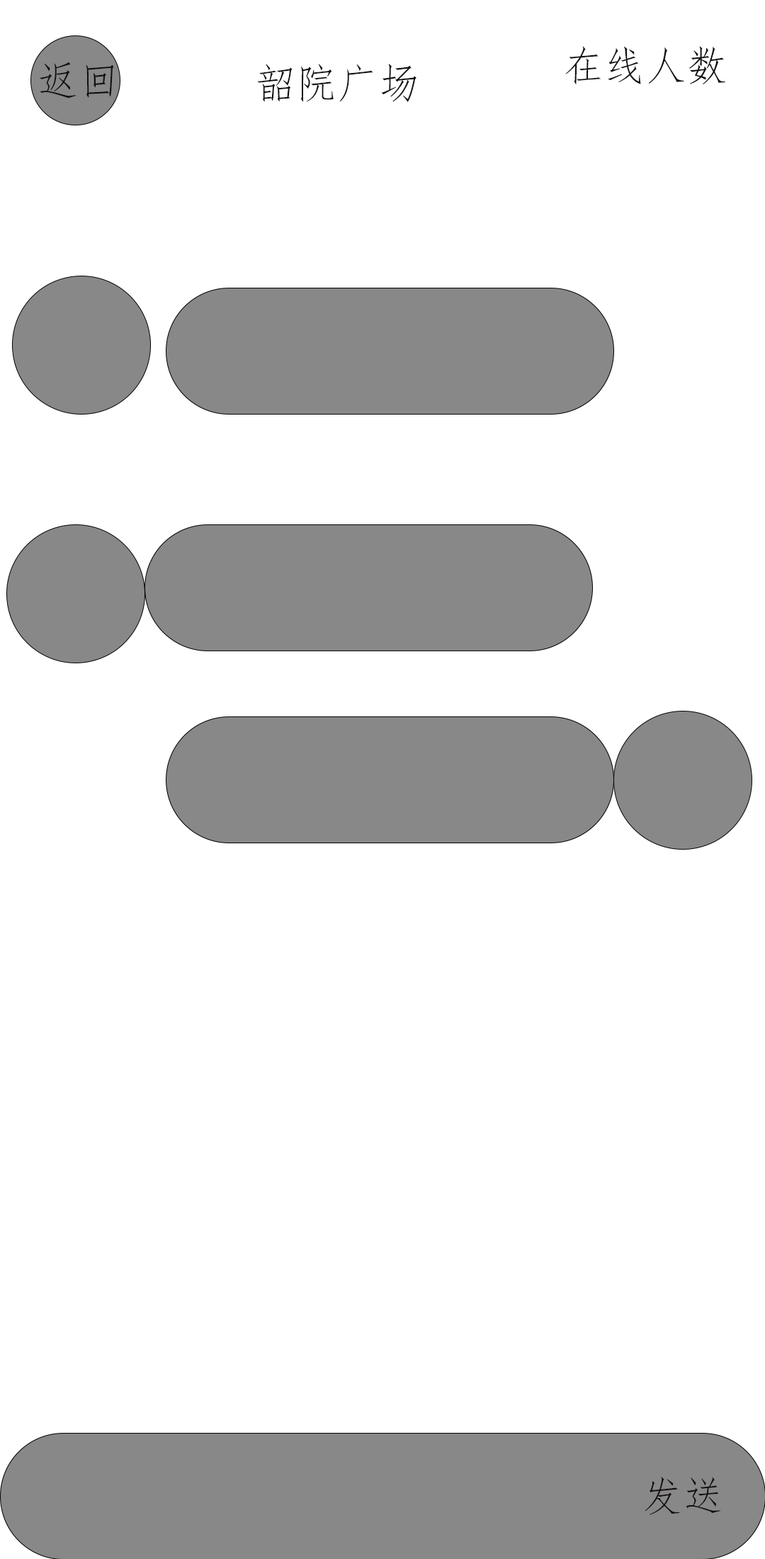
<style>
.page{position:relative;width:765px;height:1559px;background:#ffffff}
.page>*{position:absolute;margin:0}
.t1{font:41.3px "FangSong";color:#151010}
</style>
<div class="page">
<p class="t1" style="left:565px;top:46px;width:160px;height:38px">在线人数</p>
<p class="t1" style="left:40px;top:62px;width:74px;height:36px">返回</p>
<p class="t1" style="left:257px;top:64px;width:160px;height:38px">韶院广场</p>
<p class="t1" style="left:645px;top:1476px;width:75px;height:39px">发送</p>
</div>
